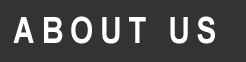
<style>
.page{position:relative;width:246px;height:62px;background:#333333}
.page>*{position:absolute;margin:0}
.t1{font:36.3px "Arial-BoldMT";letter-spacing:0.22em;color:#ffffff;scale:0.83 1}
</style>
<div class="page">
<p class="t1" style="left:13px;top:16px;width:202px;height:28px">ABOUT US</p>
</div>
